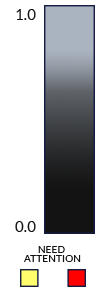
<style>
.page{position:relative;width:100px;height:299px;background:#ffffff}
.page>*{position:absolute;margin:0}
.t1{font:26.4px "Lato-Regular";color:#131313}
.t2{font:17.5px/9.2px "Lato-Regular";color:#131313}
</style>
<div class="page">
<p class="t1" style="left:16px;top:9px;width:20px;height:11px">1.0</p>
<p class="t1" style="left:15px;top:221px;width:21px;height:11px">0.0</p>
<p class="t2" style="left:24px;top:246px;width:57px;height:16px;text-align:center">NEED <br>ATTENTION</p>
</div>
